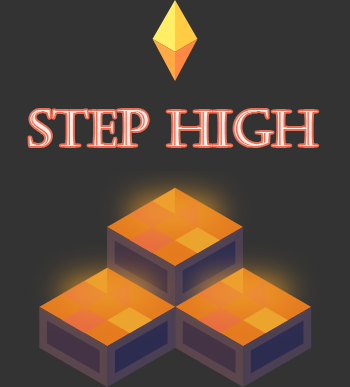
<style>
.page{position:relative;width:350px;height:387px;background:#333333}
.page>*{position:absolute;margin:0}
.t1{font:50.3px "Castellar";color:#ffece3}
</style>
<div class="page">
<p class="t1" style="left:29px;top:110px;width:289px;height:36px">STEP HIGH</p>
</div>
